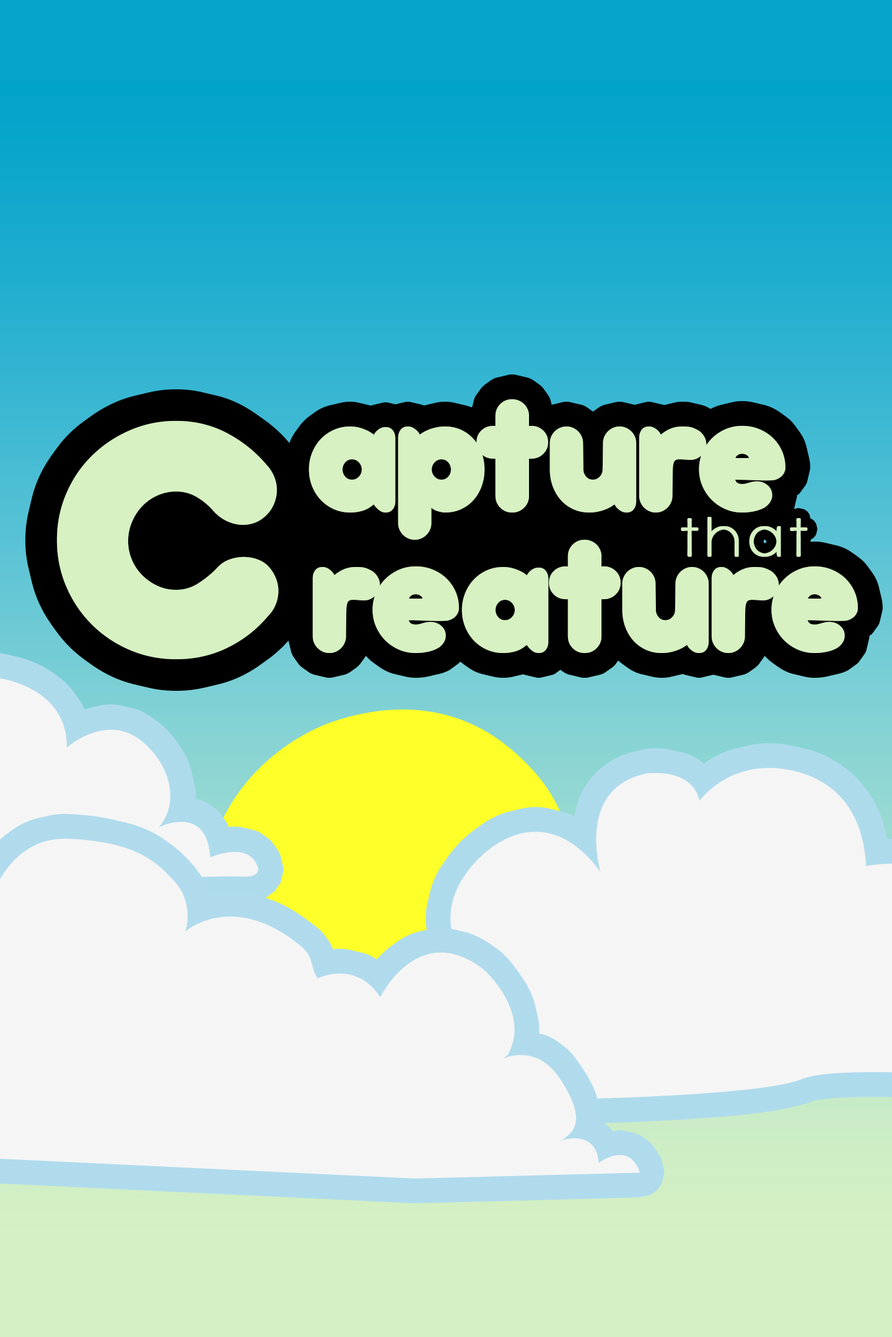
<style>
.page{position:relative;width:892px;height:1337px;background:#f5f5f5}
.page>*{position:absolute;margin:0}
.t1{font:178px "bubbleboddy-Fat";letter-spacing:-0.043em;color:#d7f1c2}
.t2{font:378px "bubbleboddy-Fat";letter-spacing:-0.043em;color:#d7f1c2}
.t3{font:61.1px "bubbleboddylight-Light";letter-spacing:0.112em;color:#d7f1c2;font-weight:bold}
</style>
<div class="page">
<p class="t1" style="left:308px;top:399px;width:477px;height:141px">apture</p>
<p class="t2" style="left:56px;top:421px;width:223px;height:238px">C</p>
<p class="t3" style="left:680px;top:517px;width:127px;height:40px">that</p>
<p class="t1" style="left:312px;top:540px;width:546px;height:113px">reature</p>
</div>
